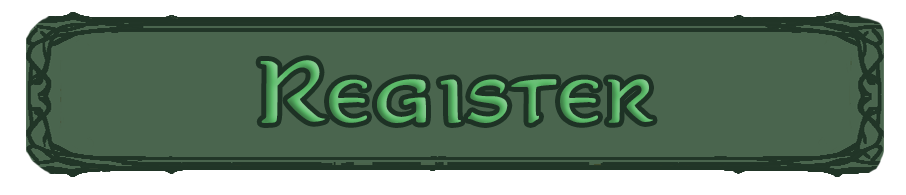
<style>
.page{position:relative;width:906px;height:195px;background:#4a654e}
.page>*{position:absolute;margin:0}
.t1{font:86.4px "MiddleEarth";color:#5bba69}
</style>
<div class="page">
<p class="t1" style="left:260px;top:60px;width:393px;height:63px">Register</p>
</div>
